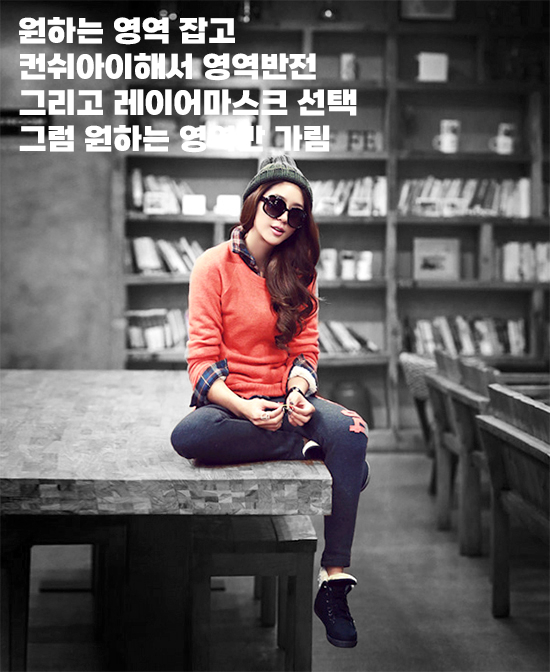
<style>
.page{position:relative;width:550px;height:672px}
.page>*{position:absolute;margin:0}
.t1{font:30px "SBAggroB";color:#ffffff}
</style>
<div class="page">
<p class="t1" style="left:19px;top:17px;width:338px;height:136px">원하는 영역 잡고 <br>컨쉬아이해서 영역반전<br>그리고 레이어마스크 선택<br>그럼 원하는 영역만 가림</p>
</div>
